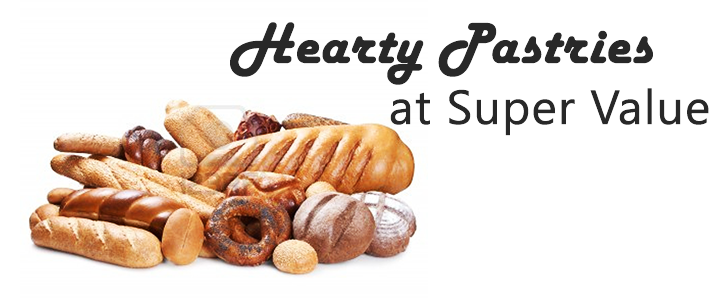
<style>
.page{position:relative;width:720px;height:300px;background:#ffffff}
.page>*{position:absolute;margin:0}
.t1{font:60px "HarlowSolid";color:#333333;font-weight:bold}
.t2{font:48px "KhmerUI";color:#333333;font-weight:bold}
</style>
<div class="page">
<p class="t1" style="left:230px;top:22px;width:423px;height:63px">Hearty Pastries</p>
<p class="t2" style="left:390px;top:88px;width:319px;height:48px">at Super Value</p>
</div>
